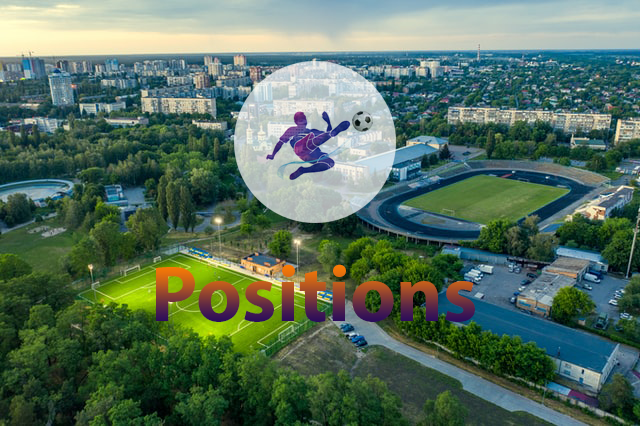
<style>
.page{position:relative;width:640px;height:426px}
.page>*{position:absolute;margin:0}
.t1{font:80px "MyriadPro-Bold"}
</style>
<div class="page">
<p class="t1" style="left:156px;top:264px;width:319px;height:58px">Positions</p>
</div>
